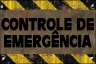
<style>
.page{position:relative;width:96px;height:64px}
.page>*{position:absolute;margin:0}
.t1{font:17px/17px "CartesDisplaySSK";letter-spacing:-0.03em;color:#000000;font-weight:bold;scale:0.85 1}
.t2{font:11.9px "Impact";letter-spacing:-0.03em;color:#000000;font-weight:bold;scale:1.21 1}
</style>
<div class="page">
<p class="t1" style="left:1px;top:18px;width:93px;height:30px;text-align:center">CONTROLE DE<br>EMERGENCIA</p>
<p class="t2" style="left:51px;top:30px;width:8px;height:5px">^</p>
</div>
